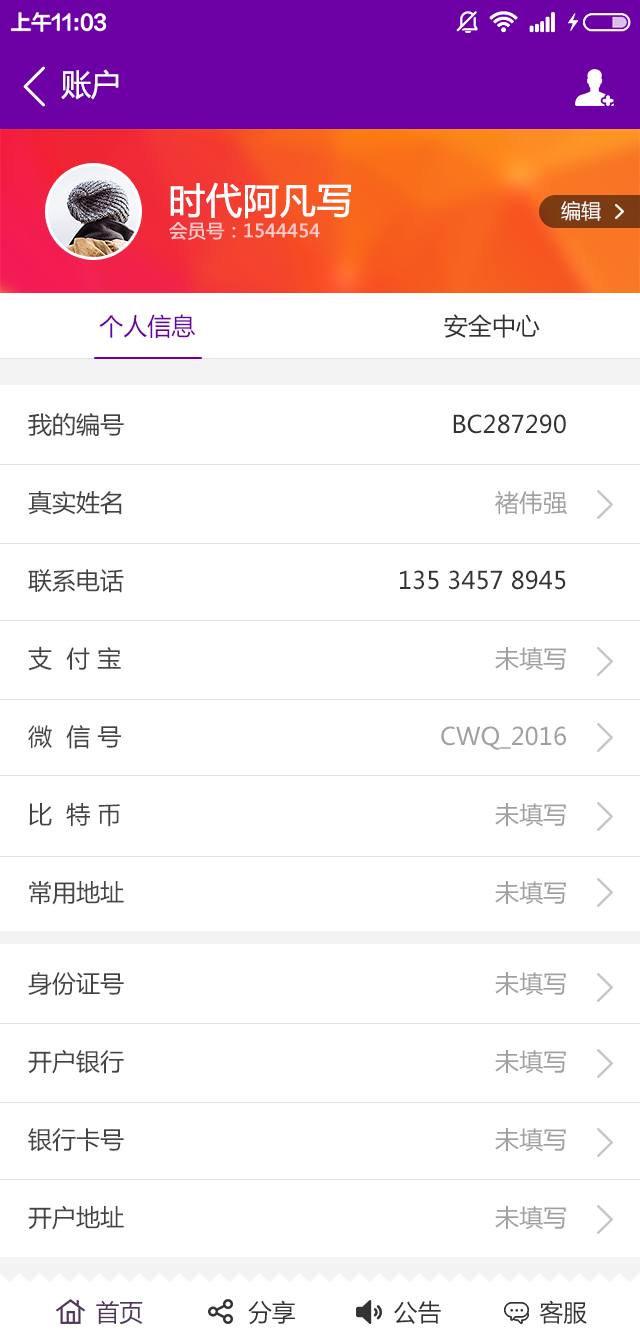
<style>
.page{position:relative;width:640px;height:1340px;background:#ffffff}
.page>*{position:absolute;margin:0}
.t1{font:30px "MicrosoftYaHei";color:#ffffff}
.t2{font:18px/24px "MicrosoftYaHei";color:#ffc9c9;text-transform:uppercase;font-weight:bold}
.t3{font:36px/24px "MicrosoftYaHei";color:#ffffff;text-transform:uppercase;font-weight:bold}
.t4{font:20px "MicrosoftYaHei";color:#ffffff;text-transform:uppercase}
.t5{font:24px "MicrosoftYaHei";color:#6d00a5;text-transform:uppercase}
.t6{font:24px "MicrosoftYaHei";color:#333333;text-transform:uppercase}
.t7{font:24px/39px "MicrosoftYaHei";color:#444444;text-transform:uppercase}
.t8{font:24px/39px "MicrosoftYaHei";color:#a0a0a0;text-transform:uppercase}
.t9{font:24px/39px "MicrosoftYaHei";color:#333333;text-transform:uppercase}
.t10{font:24px "MicrosoftYaHei";color:#333333}
.t11{font:24px "MicrosoftYaHei";color:#50385b}
</style>
<div class="page">
<p class="t1" style="left:61px;top:69px;width:58px;height:31px">账户</p>
<p class="t2" style="left:169px;top:182px;width:182px;height:58px"><span class="t3">时代阿凡写<br></span>会员号：1544454</p>
<p class="t4" style="left:561px;top:201px;width:40px;height:20px">编辑</p>
<p class="t5" style="left:99px;top:314px;width:441px;height:24px">个人信息<span class="t6">                                   安全中心</span></p>
<p class="t7" style="left:28px;top:413px;width:96px;height:492px">我的编号<br><br>真实姓名<br><br>联系电话<br><br>支  付 宝<br><br>微  信 号<br><br>比  特 币<br><br>常用地址</p>
<p class="t8" style="left:400px;top:414px;width:167px;height:491px;text-align:right"><span class="t9">BC287290<br></span><br>褚伟强<br><br><span class="t9">135 3457 8945<br><br></span>未填写<br><br>cwq_2016<br><br>未填写<br><br>未填写</p>
<p class="t7" style="left:28px;top:972px;width:96px;height:258px">身份证号<br><br>开户银行<br><br>银行卡号<br><br>开户地址</p>
<p class="t8" style="left:495px;top:972px;width:71px;height:258px;text-align:right">未填写<br><br>未填写<br><br>未填写<br><br>未填写</p>
<p class="t10" style="left:96px;top:1300px;width:491px;height:25px"><span class="t11">首页</span>               分享              公告              客服</p>
</div>
